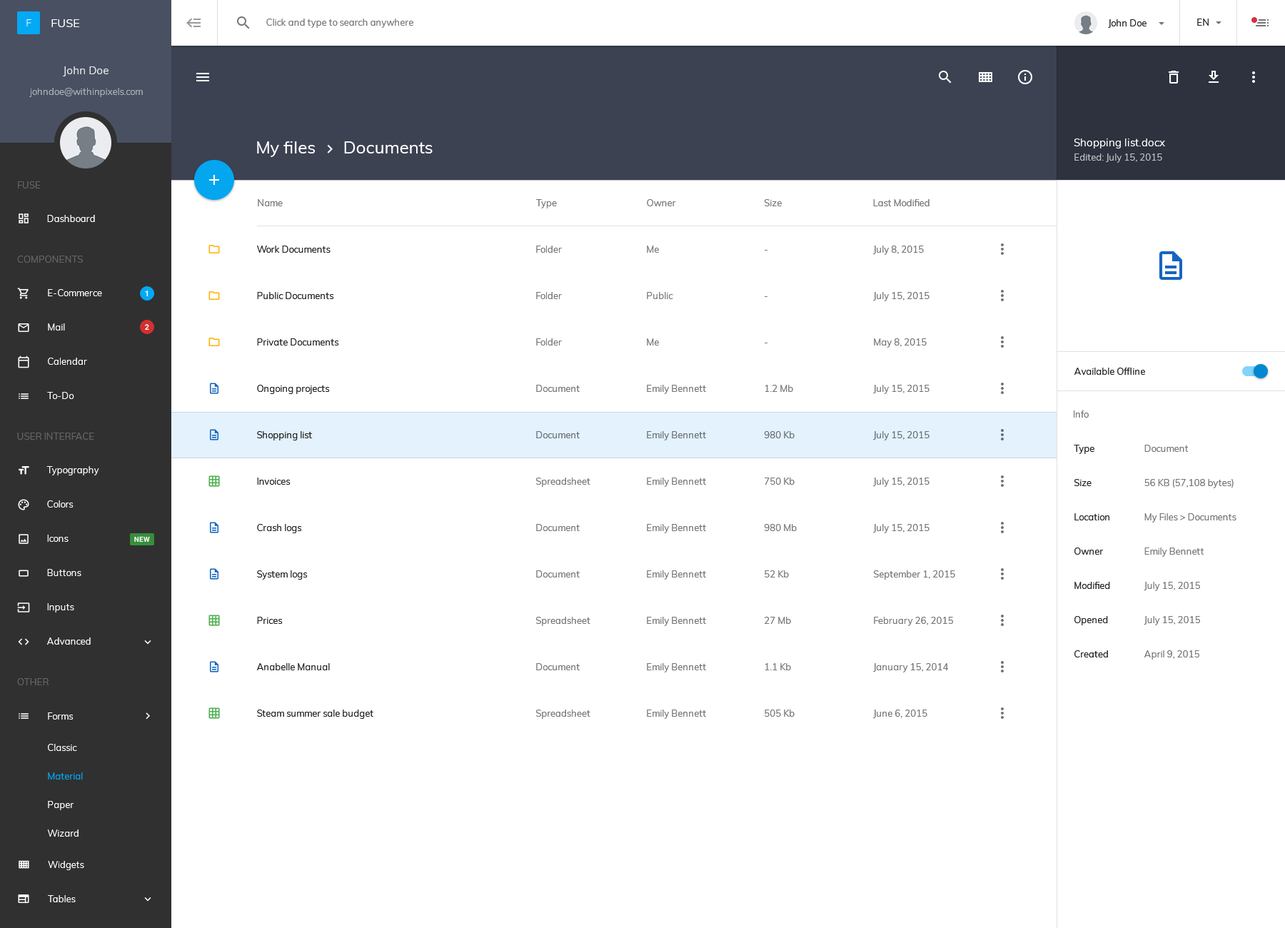
<style>
.page{position:relative;width:1285px;height:928px;background:#ffffff}
.page>*{position:absolute;margin:0}
.t1{font:17.1px "Muli-Regular";color:#ffffff}
.t2{font:10.7px "Muli-Regular";color:#ffffff}
.t3{font:9.3px "Muli-Regular";color:#c0c2c5}
.t4{font:9.3px "Muli-Regular";color:#757575}
.t5{font:9.3px "Muli-Regular";color:#212121}
.t6{font:9.3px "Muli-Regular";color:#1d1f21}
.t7{font:9.3px "Muli-Regular";color:#686f74}
.t8{font:9.3px/34.3px "Muli-Regular";color:#212121}
.t9{font:9.3px/34.3px "Muli-Regular";color:#757575}
</style>
<div class="page">
<p class="t1" style="left:257px;top:141px;width:58px;height:16px">My files</p>
<p class="t1" style="left:344px;top:141px;width:89px;height:12px">Documents</p>
<p class="t2" style="left:1074px;top:138px;width:91px;height:10px">Shopping list.docx</p>
<p class="t3" style="left:1074px;top:153px;width:88px;height:10px">Edited: July 15, 2015</p>
<p class="t4" style="left:258px;top:199px;width:25px;height:7px">Name</p>
<p class="t4" style="left:536px;top:199px;width:21px;height:9px">Type</p>
<p class="t4" style="left:647px;top:199px;width:29px;height:7px">Owner</p>
<p class="t4" style="left:765px;top:199px;width:17px;height:7px">Size</p>
<p class="t4" style="left:873px;top:199px;width:56px;height:7px">Last Modified</p>
<p class="t5" style="left:257px;top:246px;width:74px;height:7px">Work Documents</p>
<p class="t4" style="left:536px;top:246px;width:26px;height:7px">Folder</p>
<p class="t4" style="left:647px;top:246px;width:12px;height:7px">Me</p>
<p class="t4" style="left:873px;top:246px;width:51px;height:9px">July 8, 2015</p>
<p class="t4" style="left:765px;top:250px;width:2px;height:1px">-</p>
<p class="t5" style="left:257px;top:292px;width:77px;height:7px">Public Documents</p>
<p class="t4" style="left:536px;top:292px;width:26px;height:7px">Folder</p>
<p class="t4" style="left:647px;top:292px;width:26px;height:7px">Public</p>
<p class="t4" style="left:873px;top:292px;width:56px;height:9px">July 15, 2015</p>
<p class="t4" style="left:765px;top:296px;width:2px;height:1px">-</p>
<p class="t5" style="left:257px;top:338px;width:82px;height:8px">Private Documents</p>
<p class="t4" style="left:536px;top:338px;width:26px;height:8px">Folder</p>
<p class="t4" style="left:647px;top:338px;width:12px;height:8px">Me</p>
<p class="t4" style="left:874px;top:338px;width:53px;height:10px">May 8, 2015</p>
<p class="t4" style="left:765px;top:343px;width:2px;height:0px">-</p>
<p class="t5" style="left:1074px;top:368px;width:71px;height:7px">Available Offline</p>
<p class="t5" style="left:257px;top:385px;width:73px;height:9px">Ongoing projects</p>
<p class="t4" style="left:536px;top:385px;width:44px;height:7px">Document</p>
<p class="t4" style="left:647px;top:385px;width:59px;height:9px">Emily Bennett</p>
<p class="t4" style="left:765px;top:385px;width:28px;height:7px">1.2 Mb</p>
<p class="t4" style="left:873px;top:385px;width:56px;height:9px">July 15, 2015</p>
<p class="t4" style="left:1074px;top:410px;width:15px;height:8px">Info</p>
<p class="t6" style="left:257px;top:431px;width:55px;height:9px">Shopping list</p>
<p class="t7" style="left:536px;top:431px;width:44px;height:7px">Document</p>
<p class="t7" style="left:647px;top:431px;width:59px;height:9px">Emily Bennett</p>
<p class="t7" style="left:765px;top:431px;width:30px;height:7px">980 Kb</p>
<p class="t7" style="left:873px;top:431px;width:56px;height:9px">July 15, 2015</p>
<p class="t8" style="left:1074px;top:445px;width:36px;height:212px">Type<br>Size<br>Location<br>Owner<br>Modified<br>Opened<br>Created</p>
<p class="t9" style="left:1144px;top:445px;width:92px;height:215px">Document<br>56 KB (57,108 bytes)<br>My Files &gt; Documents<br>Emily Bennett<br>July 15, 2015<br>July 15, 2015<br>April 9, 2015</p>
<p class="t5" style="left:257px;top:478px;width:34px;height:7px">Invoices</p>
<p class="t4" style="left:536px;top:478px;width:54px;height:9px">Spreadsheet</p>
<p class="t4" style="left:647px;top:478px;width:59px;height:9px">Emily Bennett</p>
<p class="t4" style="left:765px;top:478px;width:30px;height:7px">750 Kb</p>
<p class="t4" style="left:873px;top:478px;width:56px;height:9px">July 15, 2015</p>
<p class="t5" style="left:257px;top:524px;width:45px;height:9px">Crash logs</p>
<p class="t4" style="left:536px;top:524px;width:44px;height:7px">Document</p>
<p class="t4" style="left:647px;top:524px;width:59px;height:9px">Emily Bennett</p>
<p class="t4" style="left:765px;top:524px;width:32px;height:7px">980 Mb</p>
<p class="t4" style="left:873px;top:524px;width:56px;height:9px">July 15, 2015</p>
<p class="t5" style="left:257px;top:570px;width:51px;height:10px">System logs</p>
<p class="t4" style="left:536px;top:570px;width:44px;height:8px">Document</p>
<p class="t4" style="left:647px;top:570px;width:59px;height:10px">Emily Bennett</p>
<p class="t4" style="left:765px;top:570px;width:24px;height:8px">52 Kb</p>
<p class="t4" style="left:874px;top:570px;width:81px;height:10px">September 1, 2015</p>
<p class="t5" style="left:257px;top:617px;width:26px;height:7px">Prices</p>
<p class="t4" style="left:536px;top:617px;width:54px;height:9px">Spreadsheet</p>
<p class="t4" style="left:647px;top:617px;width:59px;height:9px">Emily Bennett</p>
<p class="t4" style="left:765px;top:617px;width:26px;height:7px">27 Mb</p>
<p class="t4" style="left:874px;top:617px;width:79px;height:9px">February 26, 2015</p>
<p class="t5" style="left:256px;top:663px;width:74px;height:7px">Anabelle Manual</p>
<p class="t4" style="left:536px;top:663px;width:44px;height:7px">Document</p>
<p class="t4" style="left:647px;top:663px;width:59px;height:9px">Emily Bennett</p>
<p class="t4" style="left:765px;top:663px;width:26px;height:7px">1.1 Kb</p>
<p class="t4" style="left:873px;top:663px;width:75px;height:9px">January 15, 2014</p>
<p class="t5" style="left:257px;top:710px;width:116px;height:9px">Steam summer sale budget</p>
<p class="t4" style="left:536px;top:710px;width:54px;height:9px">Spreadsheet</p>
<p class="t4" style="left:647px;top:710px;width:59px;height:9px">Emily Bennett</p>
<p class="t4" style="left:765px;top:710px;width:30px;height:7px">505 Kb</p>
<p class="t4" style="left:873px;top:710px;width:54px;height:8px">June 6, 2015</p>
</div>
